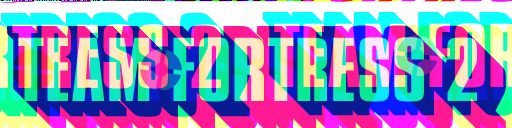
<style>
.page{position:relative;width:512px;height:128px}
.page>*{position:absolute;margin:0}
.t1{font:78px "Compacta";scale:1.18 1}
</style>
<div class="page">
<p class="t1" style="left:18px;top:23px;width:459px;height:65px">TEAM FORTRESS 2</p>
</div>
